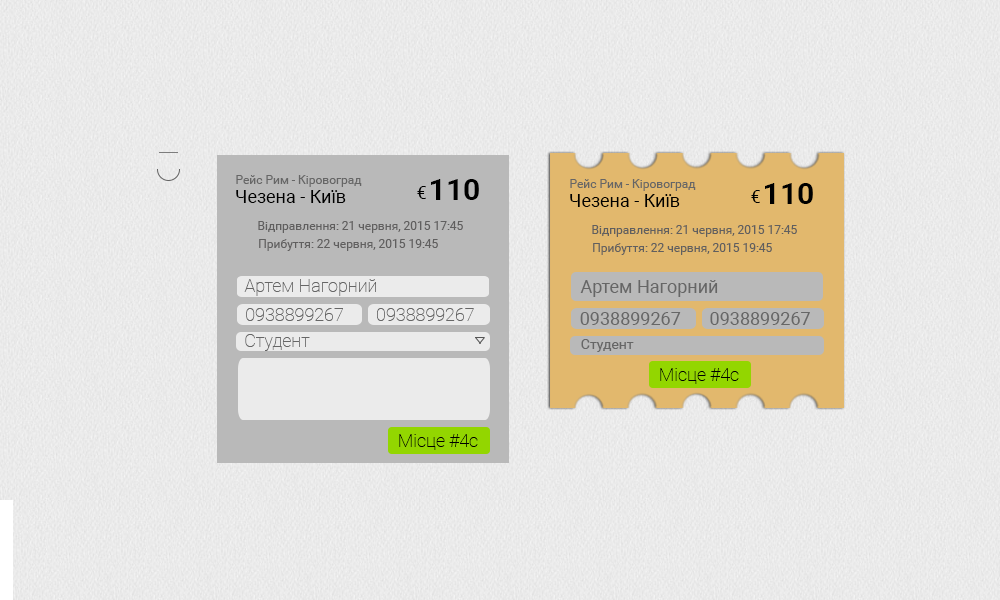
<style>
.page{position:relative;width:1000px;height:600px}
.page>*{position:absolute;margin:0}
.t1{font:12px "Roboto-Regular";color:#666666}
.t2{font:30px "Roboto-Bold";color:#000000}
.t3{font:18px "Roboto-Regular";color:#000000}
.t4{font:12px "Roboto-Regular";color:#605f5f}
.t5{font:18px "Roboto-Thin";color:#666666}
.t6{font:18px "Roboto-Regular";color:#666666}
.t7{font:14px "Roboto-Regular";color:#666666}
.t8{font:18px "Roboto-Thin";color:#000000}
</style>
<div class="page">
<p class="t1" style="left:236px;top:175px;width:126px;height:12px">Рейс Рим - Кіровоград</p>
<p class="t2" style="left:431px;top:179px;width:48px;height:21px">110</p>
<p class="t1" style="left:570px;top:179px;width:126px;height:12px">Рейс Рим - Кіровоград</p>
<p class="t2" style="left:765px;top:183px;width:48px;height:21px">110</p>
<p class="t3" style="left:236px;top:190px;width:110px;height:13px">Чезена - Київ</p>
<p class="t3" style="left:417px;top:186px;width:9px;height:13px">€</p>
<p class="t3" style="left:570px;top:194px;width:110px;height:13px">Чезена - Київ</p>
<p class="t3" style="left:751px;top:190px;width:9px;height:13px">€</p>
<p class="t4" style="left:258px;top:221px;width:205px;height:12px">Відправлення: 21 червня, 2015 17:45</p>
<p class="t4" style="left:592px;top:225px;width:205px;height:12px">Відправлення: 21 червня, 2015 17:45</p>
<p class="t4" style="left:259px;top:239px;width:179px;height:12px">Прибуття: 22 червня, 2015 19:45</p>
<p class="t4" style="left:593px;top:243px;width:179px;height:12px">Прибуття: 22 червня, 2015 19:45</p>
<p class="t5" style="left:244px;top:279px;width:132px;height:17px">Артем Нагорний</p>
<p class="t6" style="left:580px;top:280px;width:138px;height:17px">Артем Нагорний</p>
<p class="t5" style="left:246px;top:308px;width:97px;height:13px">0938899267</p>
<p class="t5" style="left:377px;top:308px;width:97px;height:13px">0938899267</p>
<p class="t6" style="left:580px;top:312px;width:101px;height:13px">0938899267</p>
<p class="t6" style="left:710px;top:312px;width:100px;height:13px">0938899267</p>
<p class="t5" style="left:245px;top:334px;width:65px;height:17px">Студент</p>
<p class="t7" style="left:581px;top:339px;width:53px;height:13px">Студент</p>
<p class="t8" style="left:660px;top:368px;width:79px;height:16px">Місце #4с</p>
<p class="t8" style="left:399px;top:434px;width:79px;height:16px">Місце #4с</p>
</div>
